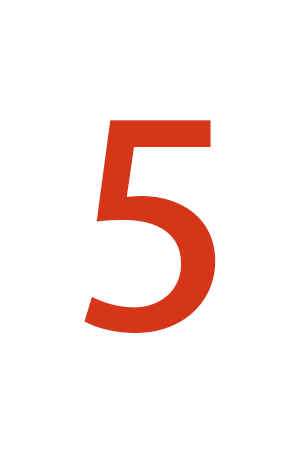
<style>
.page{position:relative;width:300px;height:450px;background:#ffffff}
.page>*{position:absolute;margin:0}
.t1{font:278.7px "AdobeFanHeitiStd-Bold";color:#d53518;scale:1.04 1}
</style>
<div class="page">
<p class="t1" style="left:84px;top:120px;width:132px;height:214px">5</p>
</div>
